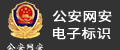
<style>
.page{position:relative;width:120px;height:50px;background:#333333}
.page>*{position:absolute;margin:0}
.t1{font:12.9px "SourceHanSansCN-Regular";color:#ffffff;font-weight:bold;scale:1.14 1}
</style>
<div class="page">
<p class="t1" style="left:52px;top:10px;width:60px;height:13px">公安网安</p>
<p class="t1" style="left:53px;top:27px;width:58px;height:13px">电子标识</p>
</div>
